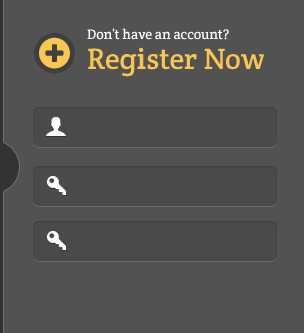
<style>
.page{position:relative;width:304px;height:333px;background:#525252}
.page>*{position:absolute;margin:0}
.t1{font:14px/30px "CreteRound-Regular";color:#ffffff}
.t2{font:30px/30px "CreteRound-Regular";color:#f9c751}
</style>
<div class="page">
<p class="t1" style="left:87px;top:28px;width:177px;height:49px">Don’t have an account?<br><span class="t2">Register Now</span></p>
</div>
